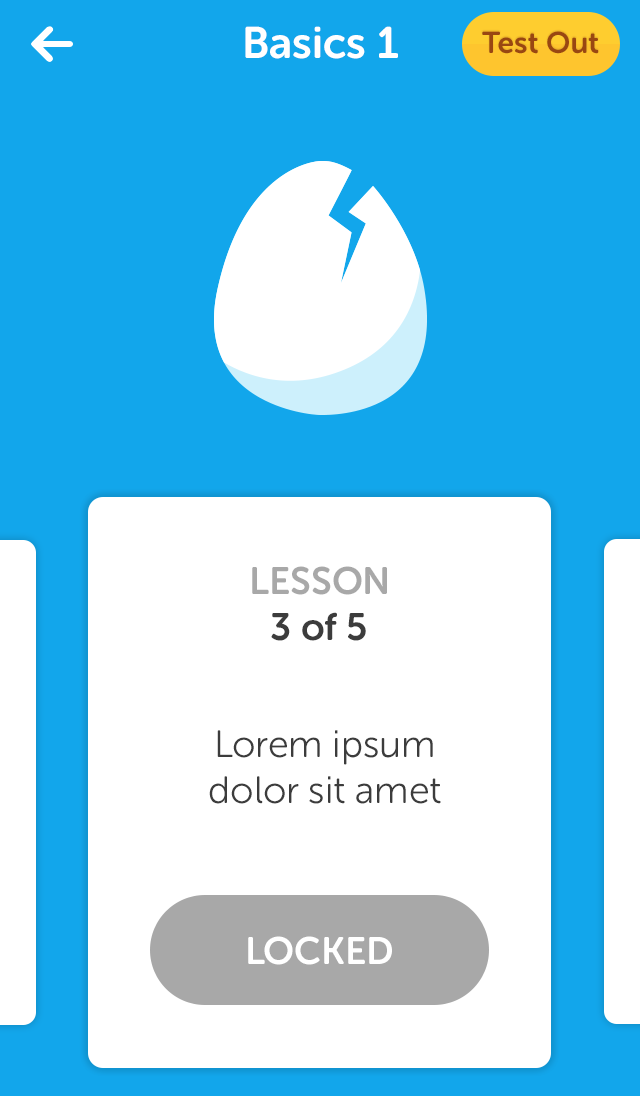
<style>
.page{position:relative;width:640px;height:1096px;background:#12a6eb}
.page>*{position:absolute;margin:0}
.t1{font:44px "MuseoSansRounded-700";color:#ffffff}
.t2{font:30px "MuseoSansRounded-700";color:#994712}
.t3{font:38px "MuseoSansRounded-700";color:#a8a8a8}
.t4{font:38px "MuseoSansRounded-700";color:#3c3c3c}
.t5{font:38px/46px "MuseoSansRounded-300";color:#3c3c3c}
.t6{font:38px "MuseoSansRounded-700";color:#ffffff}
</style>
<div class="page">
<p class="t1" style="left:245px;top:26px;width:153px;height:33px">Basics 1</p>
<p class="t2" style="left:482px;top:31px;width:117px;height:23px">Test Out</p>
<p class="t3" style="left:252px;top:566px;width:135px;height:29px">LESSON</p>
<p class="t3" style="left:252px;top:566px;width:135px;height:29px">LESSON</p>
<p class="t4" style="left:271px;top:612px;width:96px;height:29px">2 of 5</p>
<p class="t4" style="left:271px;top:612px;width:95px;height:29px">3 of 5</p>
<p class="t5" style="left:209px;top:730px;width:232px;height:74px;text-align:center">Lorem ipsum dolor sit amet</p>
<p class="t5" style="left:209px;top:730px;width:232px;height:74px;text-align:center">Lorem ipsum dolor sit amet</p>
<p class="t6" style="left:248px;top:936px;width:144px;height:29px">LOCKED</p>
</div>
